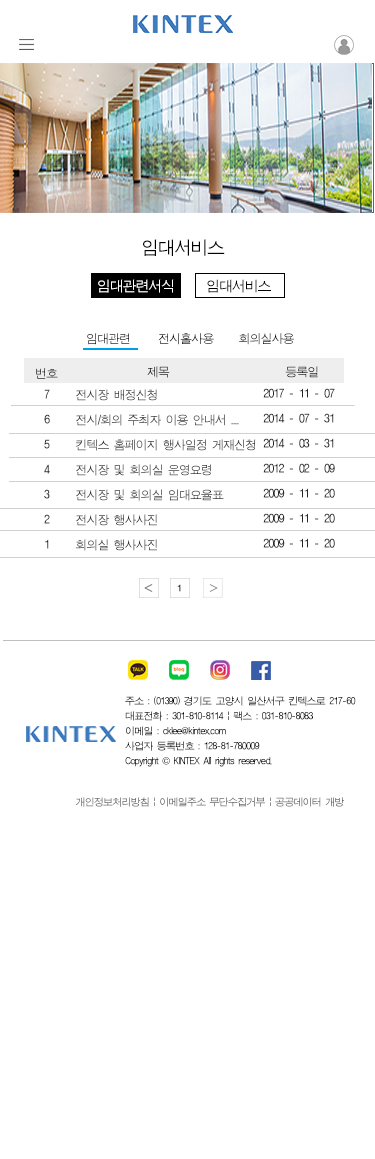
<style>
.page{position:relative;width:375px;height:1159px;background:#ffffff}
.page>*{position:absolute;margin:0}
.t1{font:18px "ÈÞ¸Õ°íµñ";letter-spacing:-0.08em;color:#010101}
.t2{font:14px "ÈÞ¸Õ°íµñ";letter-spacing:-0.08em;color:#ffffff}
.t3{font:14px "ÈÞ¸Õ°íµñ";letter-spacing:-0.08em;color:#000000}
.t4{font:12px "ÈÞ¸Õ°íµñ";letter-spacing:-0.08em;color:#000000}
.t5{font:12px "ÈÞ¸Õ°íµñ";letter-spacing:-0.08em}
.t6{font:12px/25px "ÈÞ¸Õ°íµñ";letter-spacing:-0.08em;color:#262626}
.t7{font:10px/15px "ÈÞ¸Õ°íµñ";letter-spacing:-0.08em;color:#020202}
.t8{font:10px/15px "Gulim";letter-spacing:-0.08em;color:#020202}
.t9{font:10px "ÈÞ¸Õ°íµñ";letter-spacing:-0.08em}
</style>
<div class="page">
<p class="t1" style="left:143px;top:239px;width:82px;height:17px">임대서비스</p>
<p class="t2" style="left:98px;top:279px;width:76px;height:14px">임대관련서식</p>
<p class="t3" style="left:207px;top:279px;width:64px;height:14px">임대서비스</p>
<p class="t4" style="left:87px;top:333px;width:207px;height:12px">임대관련  전시홀사용     회의실사용</p>
<p class="t5" style="left:147px;top:366px;width:23px;height:12px">제목</p>
<p class="t5" style="left:285px;top:366px;width:33px;height:12px">등록일</p>
<p class="t5" style="left:36px;top:368px;width:22px;height:11px">번호</p>
<p class="t6" style="left:44px;top:389px;width:6px;height:160px">7<br>6<br>5<br>4<br>3<br>2<br>1</p>
<p class="t6" style="left:75px;top:389px;width:181px;height:162px">전시장 배정신청<br>전시/회의 주최자 이용 안내서 ....<br>킨텍스 홈페이지 행사일정 게재신청<br>전시장 및 회의실 운영요령<br>전시장 및 회의실 임대요율표<br>전시장 행사사진<br>회의실 행사사진</p>
<p class="t6" style="left:263px;top:388px;width:72px;height:160px">2017 - 11 - 07<br>2014 - 07 - 31<br>2014 - 03 - 31<br>2012 - 02 - 09<br>2009 - 11 - 20<br>2009 - 11 - 20<br>2009 - 11 - 20</p>
<p class="t7" style="left:125px;top:696px;width:231px;height:71px">주소 : (01390) 경기도 고양시 일산서구 킨텍스로 217-60<br>대표전화 : 301-810-8114 | 팩스 : 031-810-8083<br>이메일 : cklee@kintex.com <br>사업자 등록번호 : 128-81-780009<br>Copyright <span class="t8">©</span> KINTEX All rights reserved.</p>
<p class="t9" style="left:75px;top:797px;width:269px;height:10px">개인정보처리방침 | 이메일주소 무단수집거부 | 공공데이터 개방</p>
</div>
